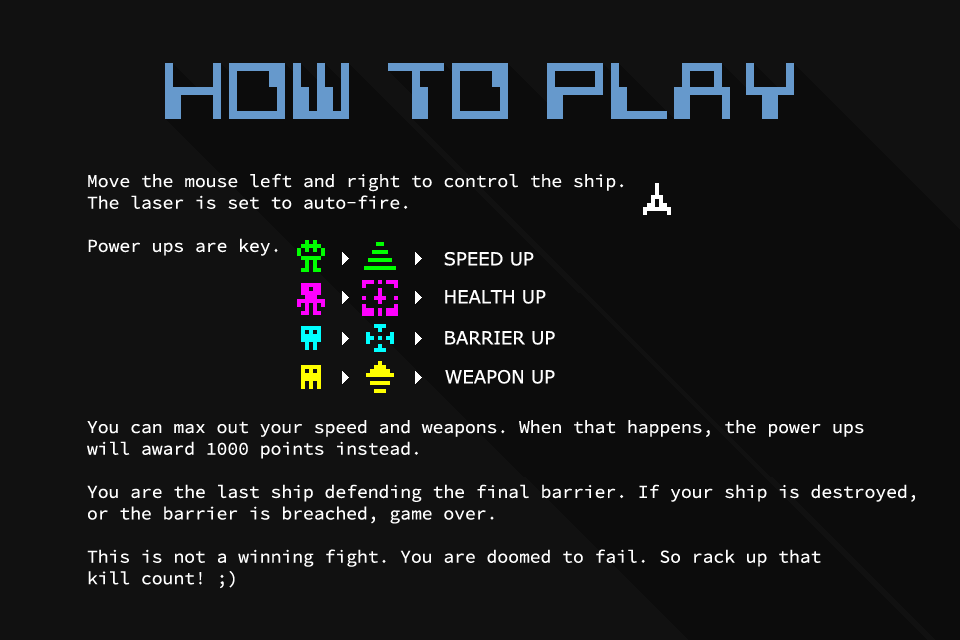
<style>
.page{position:relative;width:960px;height:640px;background:#111111}
.page>*{position:absolute;margin:0}
.t1{font:63.6px "G7-Silkworm-TTF";color:#6699cc}
.t2{font:18px "SourceCodePro-Regular";color:#ffffff}
.t3{font:18px "Verdana";color:#ffffff}
</style>
<div class="page">
<p class="t1" style="left:165px;top:63px;width:629px;height:56px">HOW TO PLAY</p>
<p class="t2" style="left:87px;top:173px;width:537px;height:83px">Move the mouse left and right to control the ship.<br>The laser is set to auto-fire.<br><br>Power ups are key.</p>
<p class="t3" style="left:444px;top:252px;width:90px;height:14px">SPEED UP</p>
<p class="t3" style="left:445px;top:290px;width:101px;height:14px">HEALTH UP</p>
<p class="t3" style="left:445px;top:331px;width:110px;height:14px">BARRIER UP</p>
<p class="t3" style="left:445px;top:369px;width:110px;height:15px">WEAPON UP</p>
<p class="t2" style="left:87px;top:420px;width:828px;height:169px">You can max out your speed and weapons. When that happens, the power ups<br>will award 1000 points instead.<br><br>You are the last ship defending the final barrier. If your ship is destroyed,<br>or the barrier is breached, game over.<br><br>This is not a winning fight. You are doomed to fail. So rack up that<br>kill count! ;)</p>
</div>
